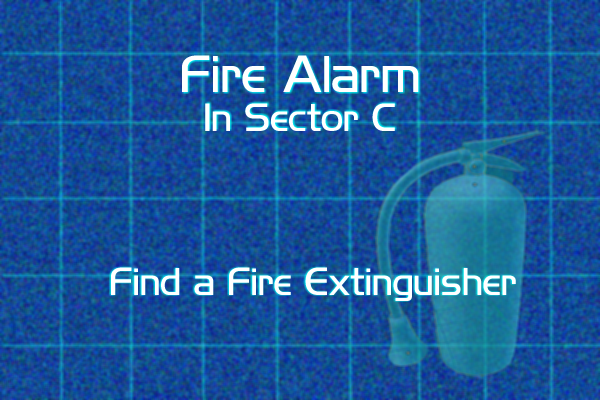
<style>
.page{position:relative;width:600px;height:400px}
.page>*{position:absolute;margin:0}
.t1{font:48px "HighlandGothicLightFLF";color:#ffffff}
.t2{font:36px "HighlandGothicLightFLF";color:#ffffff}
</style>
<div class="page">
<p class="t1" style="left:182px;top:55px;width:237px;height:37px">Fire Alarm</p>
<p class="t2" style="left:205px;top:103px;width:190px;height:28px">In Sector C</p>
<p class="t2" style="left:111px;top:267px;width:405px;height:34px">Find a Fire Extinguisher</p>
</div>
